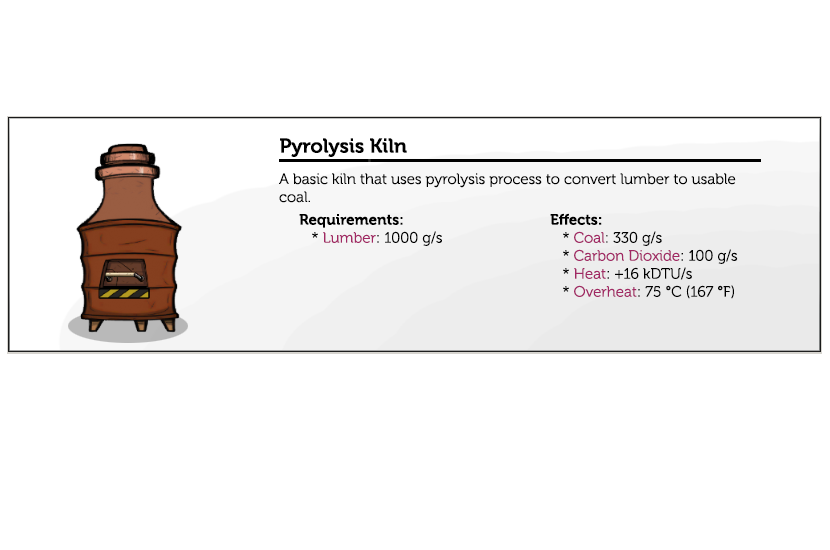
<style>
.page{position:relative;width:830px;height:550px;background:#ffffff}
.page>*{position:absolute;margin:0}
.t1{font:20px "Museo-700";color:#000000}
.t2{font:15px "Museo-300";color:#000000}
.t3{font:15px "Museo-700";color:#000000}
.t4{font:15px "Museo-300";color:#a12864}
</style>
<div class="page">
<p class="t1" style="left:280px;top:138px;width:127px;height:19px">Pyrolysis Kiln</p>
<p class="t2" style="left:279px;top:173px;width:457px;height:30px">A basic kiln that uses pyrolysis process to convert lumber to usable coal.</p>
<p class="t3" style="left:299px;top:214px;width:143px;height:32px">Requirements:<span class="t2"><br>   * </span><span class="t4">Lumber</span><span class="t2">: 1000 g/s</span></p>
<p class="t2" style="left:550px;top:213px;width:188px;height:86px"><span class="t3">Effects:</span><br>   * <span class="t4">Coal</span>: 330 g/s                    <br>   * <span class="t4">Carbon Dioxide</span>: 100 g/s<br>   * <span class="t4">Heat</span>: +16 kDTU/s<br>   * <span class="t4">Overheat</span>: 75 °C (167 °F)</p>
</div>
